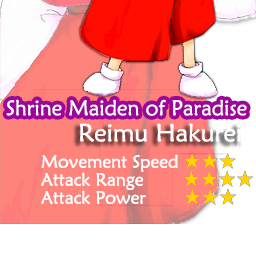
<style>
.page{position:relative;width:256px;height:256px;background:#ffffff}
.page>*{position:absolute;margin:0}
.t1{font:21.6px "MaiandraGD-Regular";color:#ffffff}
.t2{font:25px "MaiandraGD-Regular";color:#ffffff}
.t3{font:18px/18px "MaiandraGD-Regular";color:#ffffff}
</style>
<div class="page">
<p class="t1" style="left:6px;top:99px;width:241px;height:17px">Shrine Maiden of Paradise</p>
<p class="t2" style="left:79px;top:123px;width:162px;height:19px">Reimu Hakurei</p>
<p class="t3" style="left:41px;top:154px;width:137px;height:50px">Movement Speed<br>Attack Range<br>Attack Power</p>
</div>
